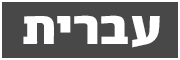
<style>
.page{position:relative;width:180px;height:60px;background:#484848}
.page>*{position:absolute;margin:0}
.t1{font:58.2px "FbAlbatros-Black";color:#ffffff}
</style>
<div class="page">
<p class="t1" style="left:23px;top:15px;width:137px;height:33px">עברית</p>
</div>
